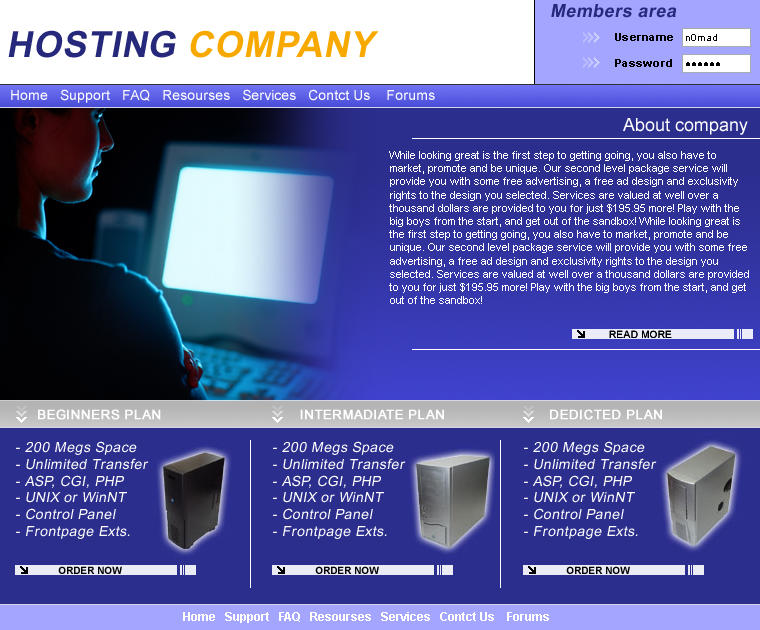
<style>
.page{position:relative;width:760px;height:630px;background:#2c2e8e}
.page>*{position:absolute;margin:0}
.t1{font:18px "Arial-BoldMT";letter-spacing:0.025em;color:#26287b;font-style:italic}
.t2{font:36px "Arial-BoldMT";letter-spacing:0.025em;color:#26287b;font-style:italic}
.t3{font:36px "Arial-BoldMT";letter-spacing:0.025em;color:#f7a900;font-style:italic}
.t4{font:11px "Arial-BoldMT";letter-spacing:0.025em;color:#000000}
.t5{font:14px "ArialMT";color:#ffffff}
.t6{font:18px "ArialMT";color:#ffffff}
.t7{font:11px "ArialMT";color:#ffffff}
.t8{font:10px "ArialMT";letter-spacing:0.025em;color:#000000}
.t9{font:13px "ArialMT";letter-spacing:0.025em;color:#ffffff;font-weight:bold}
.t10{font:14px "ArialMT";letter-spacing:0.025em;color:#ffffff;font-style:italic}
.t11{font:12px "Arial-BoldMT";color:#ffffff}
</style>
<div class="page">
<p class="t1" style="left:551px;top:4px;width:125px;height:14px">Members area</p>
<p class="t2" style="left:8px;top:30px;width:371px;height:28px">HOSTING <span class="t3">COMPANY</span></p>
<p class="t4" style="left:615px;top:33px;width:58px;height:34px">Username<br><br>Password</p>
<p class="t5" style="left:11px;top:89px;width:424px;height:14px">Home   Support   FAQ   Resourses   Services   Contct Us    Forums</p>
<p class="t6" style="left:623px;top:118px;width:125px;height:17px">About company</p>
<p class="t7" style="left:389px;top:151px;width:360px;height:153px">While looking great is the first step to getting going, you also have to market, promote and be unique. Our second level package service will provide you with some free advertising, a free ad design and exclusivity rights to the design you selected. Services are valued at well over a thousand dollars are provided to you for just $195.95 more! Play with the big boys from the start, and get out of the sandbox! While looking great is the first step to getting going, you also have to market, promote and be unique. Our second level package service will provide you with some free advertising, a free ad design and exclusivity rights to the design you selected. Services are valued at well over a thousand dollars are provided to you for just $195.95 more! Play with the big boys from the start, and get out of the sandbox!</p>
<p class="t8" style="left:609px;top:330px;width:63px;height:8px">READ MORE</p>
<p class="t9" style="left:38px;top:409px;width:123px;height:11px">BEGINNERS PLAN</p>
<p class="t9" style="left:300px;top:409px;width:144px;height:11px">INTERMADIATE PLAN</p>
<p class="t9" style="left:550px;top:409px;width:112px;height:11px">DEDICTED PLAN</p>
<p class="t10" style="left:16px;top:441px;width:133px;height:98px">- 200 Megs Space<br>- Unlimited Transfer<br>- ASP, CGI, PHP<br>- UNIX or WinNT<br>- Control Panel<br>- Frontpage Exts.</p>
<p class="t10" style="left:273px;top:441px;width:133px;height:98px">- 200 Megs Space<br>- Unlimited Transfer<br>- ASP, CGI, PHP<br>- UNIX or WinNT<br>- Control Panel<br>- Frontpage Exts.</p>
<p class="t10" style="left:524px;top:441px;width:133px;height:98px">- 200 Megs Space<br>- Unlimited Transfer<br>- ASP, CGI, PHP<br>- UNIX or WinNT<br>- Control Panel<br>- Frontpage Exts.</p>
<p class="t11" style="left:183px;top:612px;width:366px;height:11px">Home   Support   FAQ   Resourses   Services   Contct Us    Forums</p>
</div>
